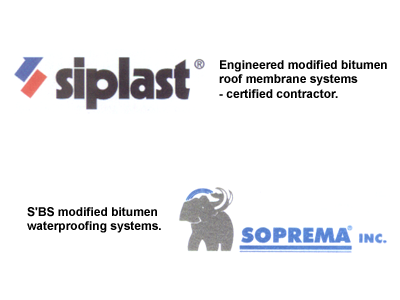
<style>
.page{position:relative;width:400px;height:300px;background:#ffffff}
.page>*{position:absolute;margin:0}
.t1{font:12px "Arial-BoldMT";color:#000000}
</style>
<div class="page">
<p class="t1" style="left:219px;top:60px;width:168px;height:38px">Engineered modified bitumen<br>roof membrane systems<br>- certified contractor.</p>
<p class="t1" style="left:27px;top:207px;width:134px;height:26px">S'BS modified bitumen<br>waterproofing systems.</p>
</div>
